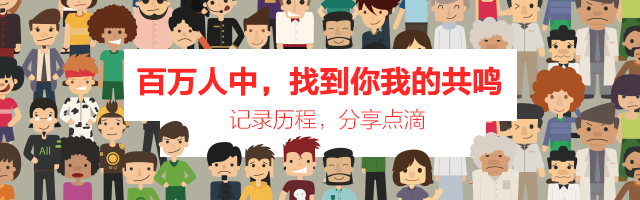
<style>
.page{position:relative;width:640px;height:200px;background:#ffffff}
.page>*{position:absolute;margin:0}
.t1{font:30px "FZLTZHK--GBK1-0";letter-spacing:-0.01em;color:#ff2826;font-weight:bold}
.t2{font:22px "FZLTXHK--GBK1-0";letter-spacing:-0.01em;color:#ff2826}
</style>
<div class="page">
<p class="t1" style="left:137px;top:66px;width:365px;height:31px">百万人中，找到你我的共鸣</p>
<p class="t2" style="left:229px;top:108px;width:196px;height:22px">记录历程，分享点滴</p>
</div>
